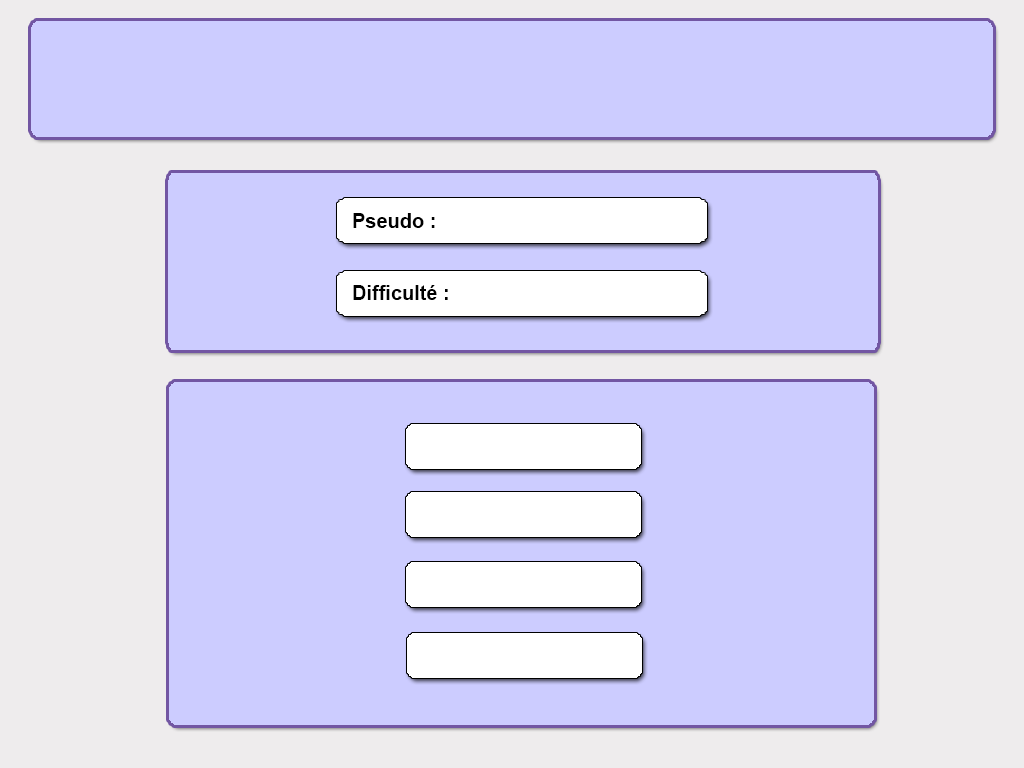
<style>
.page{position:relative;width:1024px;height:768px;background:#ccccff}
.page>*{position:absolute;margin:0}
.t1{font:20px "Arial-BoldMT";color:#000000}
</style>
<div class="page">
<p class="t1" style="left:353px;top:213px;width:82px;height:15px">Pseudo :</p>
<p class="t1" style="left:353px;top:285px;width:95px;height:15px">Difficulté :</p>
</div>
